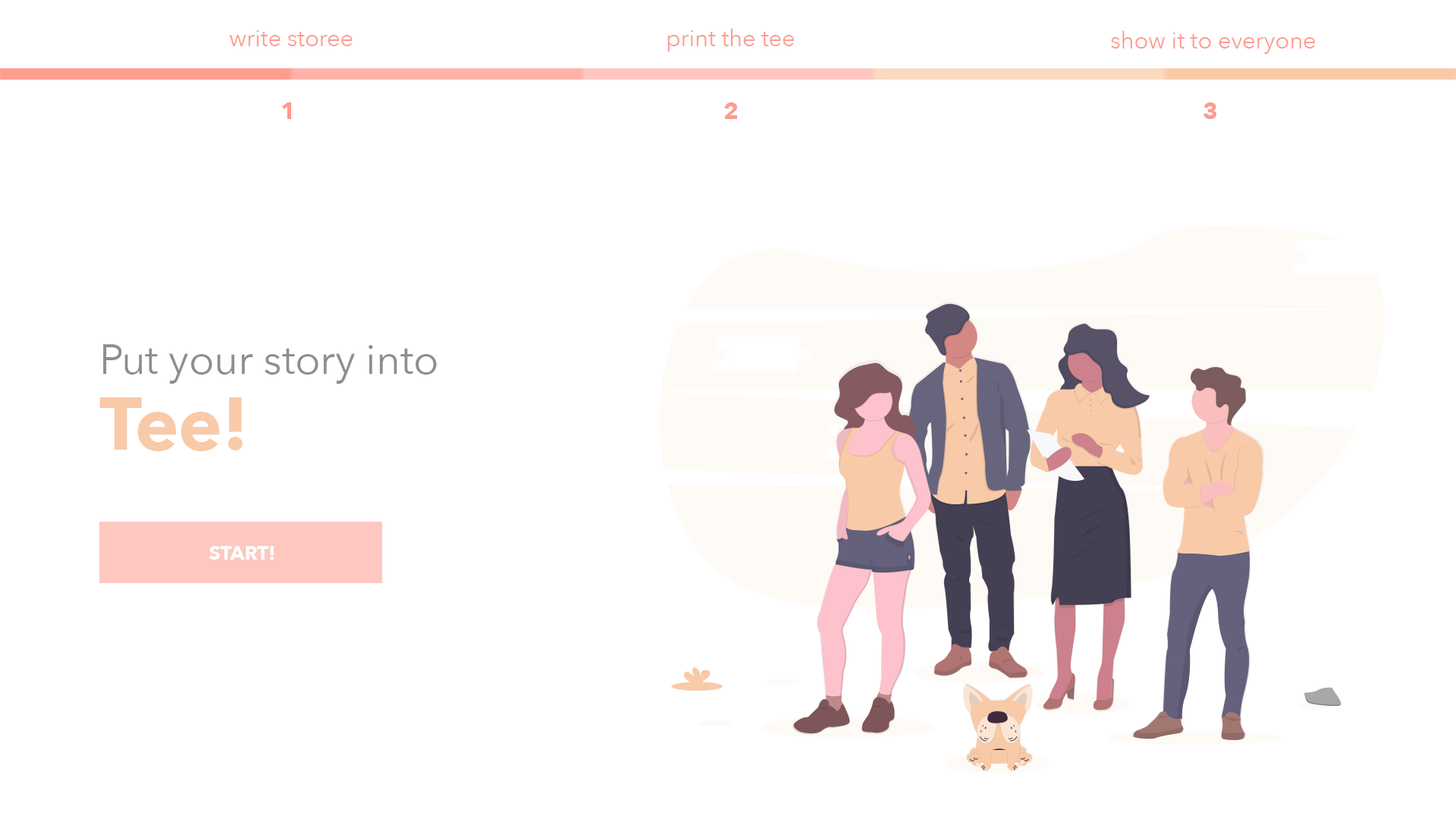
<style>
.page{position:relative;width:1456px;height:819px;background:#ffffff}
.page>*{position:absolute;margin:0}
.t1{font:23.2px "AvenirNext-Regular";color:#fe9c8f}
.t2{font:23.2px "AvenirNext-Bold";color:#fe9c8f}
.t3{font:41.4px/41.3px "AvenirNext-Regular";color:#8e8e8e}
.t4{font:73.3px/75.4px "AvenirNext-Bold";color:#f8caa8}
.t5{font:19.4px "AvenirNext-Bold";color:#ffffff}
</style>
<div class="page">
<p class="t1" style="left:667px;top:28px;width:127px;height:24px">print the tee</p>
<p class="t1" style="left:229px;top:30px;width:124px;height:16px">write storee</p>
<p class="t1" style="left:1111px;top:30px;width:204px;height:24px">show it to everyone</p>
<p class="t2" style="left:282px;top:102px;width:9px;height:17px">1</p>
<p class="t2" style="left:724px;top:102px;width:13px;height:17px">2</p>
<p class="t2" style="left:1203px;top:102px;width:14px;height:17px">3</p>
<p class="t3" style="left:99px;top:344px;width:338px;height:107px">Put your story into<br><span class="t4">Tee!</span></p>
<p class="t5" style="left:209px;top:546px;width:66px;height:14px">START!</p>
</div>
